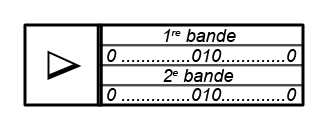
<style>
.page{position:relative;width:330px;height:130px;background:#ffffff}
.page>*{position:absolute;margin:0}
.t1{font:18px "Arial-ItalicMT";color:#000000}
.t2{font:50px "Arial-ItalicMT";color:#000000}
</style>
<div class="page">
<p class="t1" style="left:164px;top:29px;width:72px;height:13px">1re bande</p>
<p class="t2" style="left:47px;top:50px;width:35px;height:30px;rotate:90deg">∆</p>
<p class="t1" style="left:107px;top:49px;width:190px;height:13px">0 ..............010.............0</p>
<p class="t1" style="left:163px;top:69px;width:71px;height:13px">2e bande</p>
<p class="t1" style="left:107px;top:88px;width:190px;height:13px">0 ..............010.............0</p>
</div>
